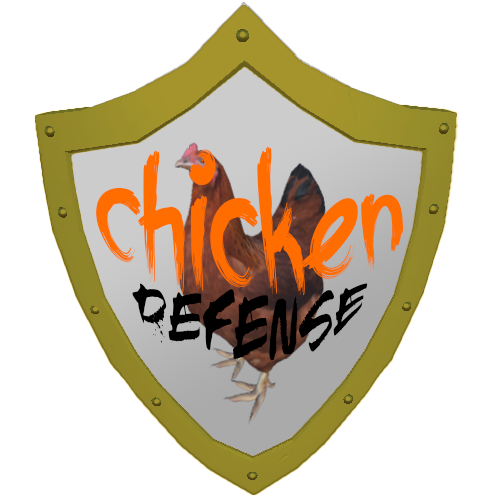
<style>
.page{position:relative;width:500px;height:500px;background:#ffffff}
.page>*{position:absolute;margin:0}
.t1{font:110px "BuriedK9";letter-spacing:0.01em;color:#ff6c00}
.t2{font:48px "RElapse-Regular";letter-spacing:0.01em;color:#000000}
</style>
<div class="page">
<p class="t1" style="left:96px;top:146px;width:307px;height:150px">chicken</p>
<p class="t2" style="left:132px;top:283px;width:236px;height:79px">defense</p>
</div>
